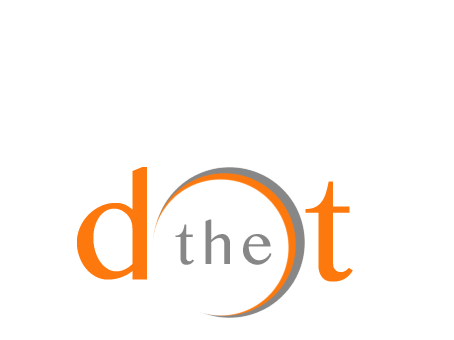
<style>
.page{position:relative;width:454px;height:340px;background:#ffffff}
.page>*{position:absolute;margin:0}
.t1{font:200px "SinhalaMN";letter-spacing:0.1em;color:#fe790d}
.t2{font:80px "SinhalaMN";letter-spacing:0.1em;color:#878787}
</style>
<div class="page">
<p class="t1" style="left:77px;top:167px;width:70px;height:113px">d</p>
<p class="t1" style="left:305px;top:181px;width:48px;height:101px">t</p>
<p class="t2" style="left:175px;top:219px;width:97px;height:46px">the</p>
</div>
